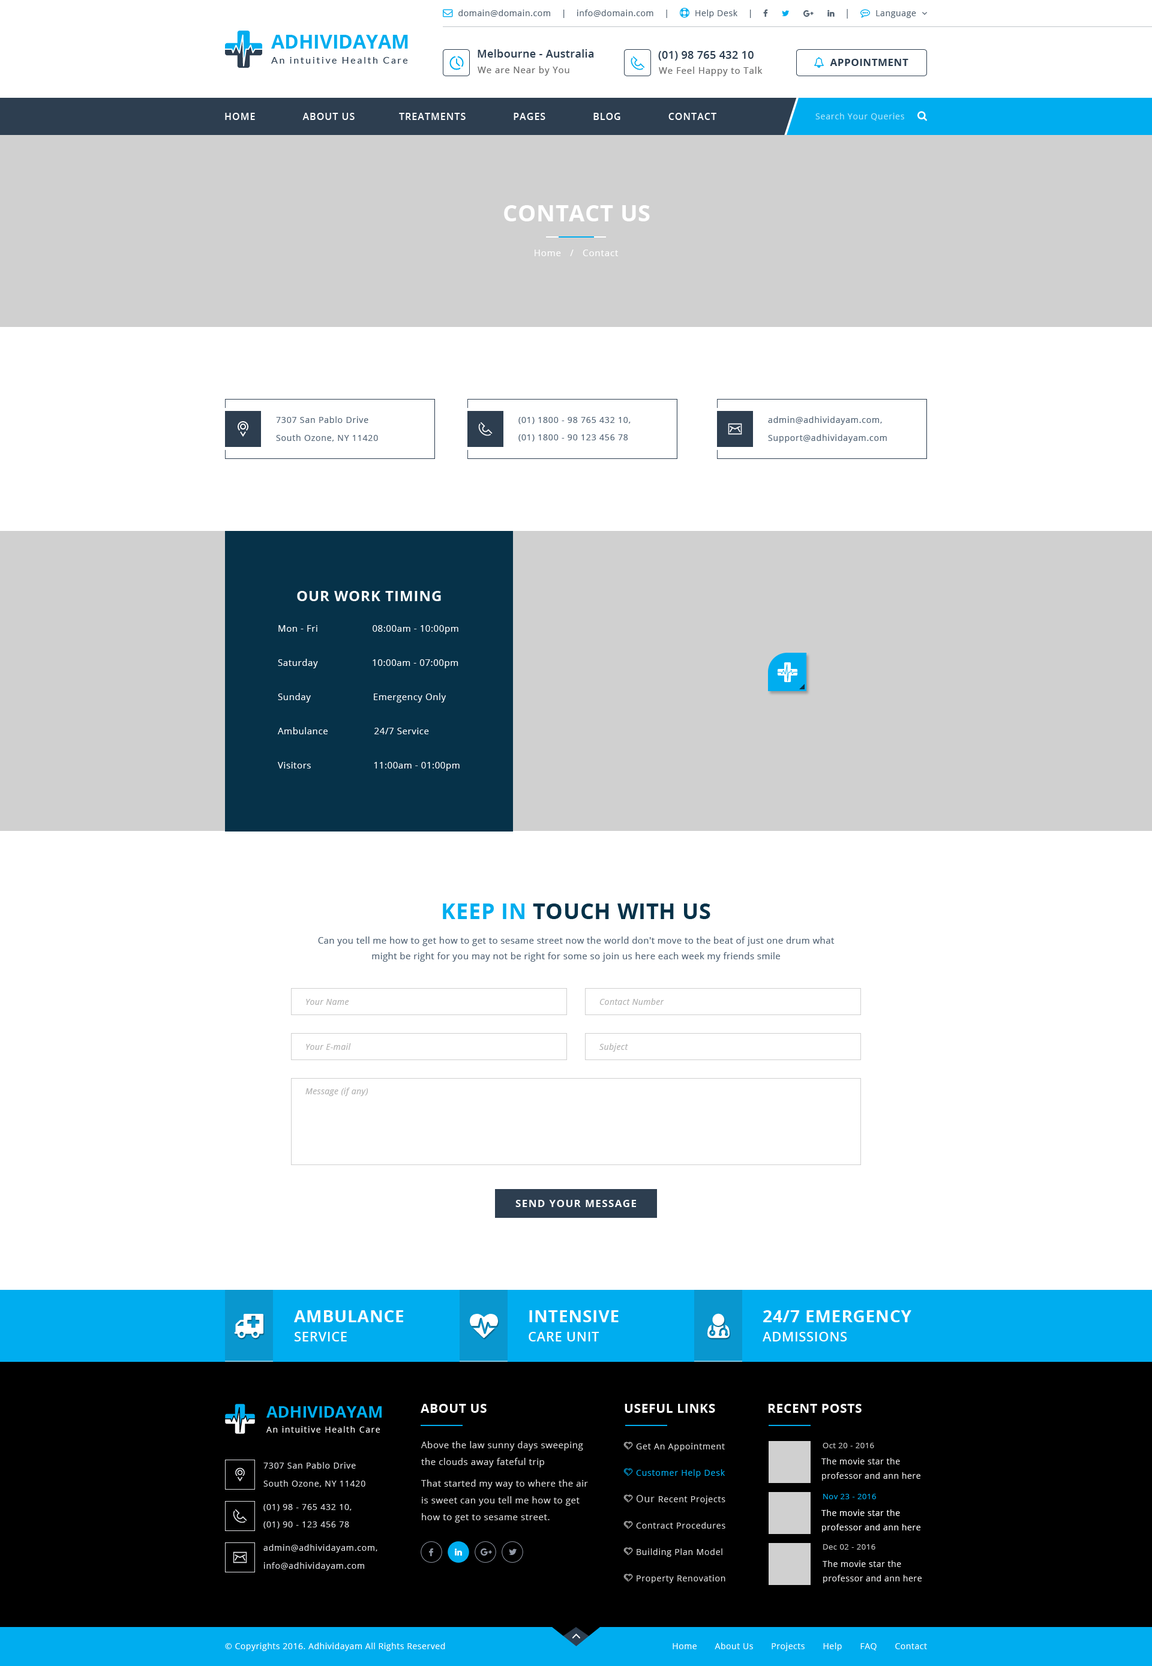
<style>
.page{position:relative;width:1152px;height:1666px;background:#ffffff}
.page>*{position:absolute;margin:0}
.t1{font:19.2px "OpenSans-Bold";color:#00adef;text-transform:uppercase}
.t2{font:10.8px "OpenSans-Semibold";letter-spacing:0.02em;color:#2d3e50}
.t3{font:9.6px "Lato-Regular";letter-spacing:0.16em;color:#2d3e50}
.t4{font:9px "OpenSans";letter-spacing:0.06em;color:#6a6a6a}
.t5{font:9.6px "OpenSans-Semibold";letter-spacing:0.065em;color:#ffffff;text-transform:uppercase}
.t6{font:8.4px "OpenSans";letter-spacing:0.06em;color:#b3e7fa}
.t7{font:22.8px "OpenSans-Bold";letter-spacing:0.02em;color:#ffffff;text-transform:uppercase}
.t8{font:9px "OpenSans";letter-spacing:0.06em;color:#ffffff}
.t9{font:8.4px/18px "OpenSans";letter-spacing:0.06em;color:#556677}
.t10{font:8.4px/17.4px "OpenSans";letter-spacing:0.06em;color:#556677}
.t11{font:14.4px "OpenSans-Bold";letter-spacing:0.04em;color:#ffffff;text-transform:uppercase}
.t12{font:9px/34.2px "OpenSans";letter-spacing:0.04em;color:#ffffff}
.t13{font:21.6px "OpenSans-Bold";letter-spacing:0.02em;color:#063249;text-transform:uppercase}
.t14{font:21.6px "OpenSans-Bold";letter-spacing:0.02em;color:#00adef;text-transform:uppercase}
.t15{font:9px/15.6px "OpenSans";letter-spacing:0.03em;color:#556677}
.t16{font:8.4px "OpenSans-Italic";letter-spacing:0.03em;color:#b1b1b1}
.t17{font:10.2px "OpenSans-Bold";letter-spacing:0.08em;color:#ffffff;text-transform:uppercase}
.t18{font:16.8px/21.6px "OpenSans-Bold";letter-spacing:0.03em;color:#ffffff;text-transform:uppercase}
.t19{font:13.2px/19.2px "OpenSans-Semibold";letter-spacing:0.03em;color:#ffffff;text-transform:uppercase}
.t20{font:16.2px "OpenSans-Bold";color:#00adef;text-transform:uppercase}
.t21{font:12.6px "OpenSans-Bold";letter-spacing:0.03em;color:#ffffff;text-transform:uppercase}
.t22{font:8.4px "OpenSans";letter-spacing:0.11em;color:#ffffff}
.t23{font:9px/16.8px "OpenSans";letter-spacing:0.04em;color:#dbdbdb}
.t24{font:9px/21.6px "OpenSans";letter-spacing:0.04em;color:#dbdbdb}
.t25{font:7.8px "OpenSans";letter-spacing:0.04em;color:#c8c8c8}
.t26{font:8.4px/18px "OpenSans";letter-spacing:0.06em;color:#e0e1e4}
.t27{font:8.4px/14.4px "OpenSans";letter-spacing:0.04em;color:#eae9e9}
.t28{font:7.8px "OpenSans";letter-spacing:0.04em;color:#00adef}
.t29{font:8.4px/17.4px "OpenSans";letter-spacing:0.06em;color:#e0e1e4}
.t30{font:8.4px/14.4px "OpenSans";letter-spacing:0.04em;color:#ffffff}
.t31{font:8.4px "OpenSans";letter-spacing:0.04em;color:#ffffff}
</style>
<div class="page">
<p class="t1" style="left:271px;top:35px;width:137px;height:14px">adhividayam</p>
<p class="t2" style="left:478px;top:49px;width:116px;height:9px">Melbourne - Australia</p>
<p class="t2" style="left:658px;top:51px;width:96px;height:10px">(01) 98 765 432 10</p>
<p class="t3" style="left:271px;top:57px;width:137px;height:7px">An intuitive Health Care</p>
<p class="t4" style="left:478px;top:66px;width:91px;height:10px">We are Near by You</p>
<p class="t4" style="left:659px;top:67px;width:104px;height:9px">We Feel Happy to Talk</p>
<p class="t5" style="left:225px;top:113px;width:491px;height:7px">Home               About Us              Treatments               Pages               Blog               Contact</p>
<p class="t6" style="left:815px;top:113px;width:89px;height:8px">Search Your Queries</p>
<p class="t7" style="left:504px;top:205px;width:146px;height:16px">Contact Us</p>
<p class="t8" style="left:535px;top:250px;width:84px;height:6px">Home   /   Contact</p>
<p class="t9" style="left:276px;top:416px;width:102px;height:26px">7307 San Pablo Drive<br>South Ozone, NY 11420</p>
<p class="t10" style="left:518px;top:417px;width:113px;height:25px">(01) 1800 - 98 765 432 10,<br>(01) 1800 - 90 123 456 78</p>
<p class="t9" style="left:768px;top:416px;width:119px;height:27px">admin@adhividayam.com,<br>Support@adhividayam.com</p>
<p class="t11" style="left:297px;top:591px;width:144px;height:10px">Our Work Timing</p>
<p class="t12" style="left:278px;top:625px;width:182px;height:146px">Mon - Fri                    08:00am - 10:00pm<br>Saturday                    10:00am - 07:00pm<br>Sunday                       Emergency Only<br>Ambulance                 24/7 Service<br>Visitors                       11:00am - 01:00pm</p>
<p class="t13" style="left:443px;top:904px;width:267px;height:15px"><span class="t14">Keep in </span>Touch with Us</p>
<p class="t15" style="left:318px;top:937px;width:517px;height:25px;text-align:center">Can you tell me how to get how to get to sesame street now the world don't move to the beat of just one drum what might be right for you may not be right for some so join us here each week my friends smile<br> from seven</p>
<p class="t16" style="left:306px;top:999px;width:43px;height:6px">Your Name</p>
<p class="t16" style="left:599px;top:998px;width:65px;height:7px">Contact Number</p>
<p class="t16" style="left:306px;top:1043px;width:45px;height:7px">Your E-mail</p>
<p class="t16" style="left:599px;top:1043px;width:29px;height:9px">Subject</p>
<p class="t16" style="left:305px;top:1088px;width:63px;height:8px">Message (if any)</p>
<p class="t17" style="left:515px;top:1200px;width:121px;height:7px">Send Your Message</p>
<p class="t18" style="left:294px;top:1310px;width:109px;height:32px">Ambulance <br><span class="t19">Service</span></p>
<p class="t18" style="left:529px;top:1310px;width:90px;height:32px">Intensive<br><span class="t19">Care Unit</span></p>
<p class="t18" style="left:763px;top:1310px;width:148px;height:32px">24/7 Emergency<br><span class="t19">Admissions</span></p>
<p class="t20" style="left:266px;top:1406px;width:116px;height:12px">adhividayam</p>
<p class="t21" style="left:421px;top:1404px;width:66px;height:9px">About Us</p>
<p class="t21" style="left:625px;top:1404px;width:90px;height:9px">Useful Links</p>
<p class="t21" style="left:768px;top:1404px;width:94px;height:9px">Recent Posts</p>
<p class="t22" style="left:266px;top:1426px;width:114px;height:7px">An intuitive Health Care</p>
<p class="t23" style="left:421px;top:1441px;width:167px;height:82px">Above the law sunny days sweeping the clouds away fateful trip<br><span class="t24">That </span>started my way to where the air is sweet can you tell me how to get how to get to sesame street.</p>
<p class="t25" style="left:823px;top:1443px;width:51px;height:5px">Oct 20 - 2016</p>
<p class="t26" style="left:263px;top:1462px;width:102px;height:25px">7307 San Pablo Drive<br>South Ozone, NY 11420</p>
<p class="t27" style="left:821px;top:1458px;width:99px;height:23px">The movie star the professor and ann here on</p>
<p class="t28" style="left:823px;top:1494px;width:53px;height:5px">Nov 23 - 2016</p>
<p class="t29" style="left:263px;top:1504px;width:89px;height:25px">(01) 98 - 765 432 10,<br>(01) 90 - 123 456 78</p>
<p class="t30" style="left:821px;top:1510px;width:99px;height:22px">The movie star the professor and ann here on</p>
<p class="t26" style="left:263px;top:1544px;width:114px;height:27px">admin@adhividayam.com,<br>info@adhividayam.com</p>
<p class="t25" style="left:823px;top:1544px;width:52px;height:6px">Dec 02 - 2016</p>
<p class="t27" style="left:823px;top:1561px;width:99px;height:22px">The movie star the professor and ann here on</p>
<p class="t31" style="left:225px;top:1643px;width:220px;height:8px">© Copyrights 2016. Adhividayam All Rights Reserved</p>
<p class="t31" style="left:673px;top:1643px;width:254px;height:8px">Home       About Us       Projects       Help       FAQ       Contact</p>
</div>
